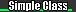
<style>
.page{position:relative;width:76px;height:12px;background:#333333}
.page>*{position:absolute;margin:0}
.t1{font:11px "Impact";color:#ffffff}
</style>
<div class="page">
<p class="t1" style="left:9px;top:1px;width:58px;height:10px">Simple Class</p>
</div>
